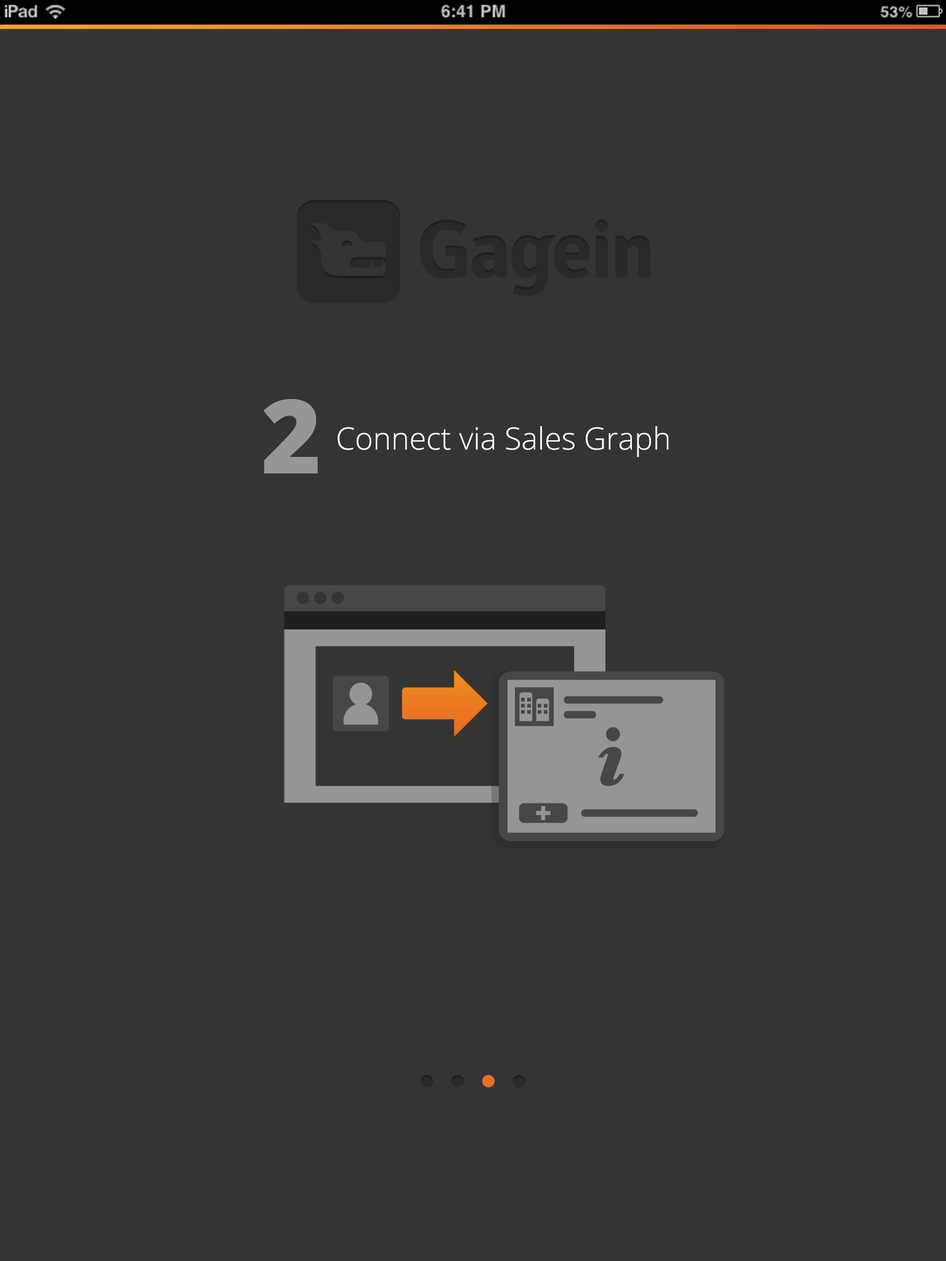
<style>
.page{position:relative;width:946px;height:1261px;background:#343434}
.page>*{position:absolute;margin:0}
.t1{font:102.6px "OpenSans-Extrabold";color:#969696}
.t2{font:30.8px "OpenSans-Light";color:#ffffff}
</style>
<div class="page">
<p class="t1" style="left:263px;top:399px;width:55px;height:74px">2</p>
<p class="t2" style="left:337px;top:426px;width:332px;height:31px">Connect via Sales Graph</p>
</div>
